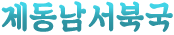
<style>
.page{position:relative;width:174px;height:35px;background:#ffffff}
.page>*{position:absolute;margin:0}
.t1{font:33px "SDKukdetopokki-aLt";letter-spacing:0.06em;font-weight:bold;scale:0.9 1}
.t2{font:33px "SDKukdetopokki-aLt";letter-spacing:0.06em;color:#32a2b1;font-weight:bold;scale:0.9 1}
</style>
<div class="page">
<p class="t1" style="left:1px;top:1px;width:26px;height:31px">제</p>
<p class="t1" style="left:29px;top:2px;width:28px;height:30px">동</p>
<p class="t1" style="left:59px;top:1px;width:27px;height:31px">남</p>
<p class="t2" style="left:88px;top:1px;width:26px;height:31px">서</p>
<p class="t1" style="left:116px;top:1px;width:28px;height:31px">북</p>
<p class="t1" style="left:145px;top:2px;width:28px;height:30px">국</p>
</div>
